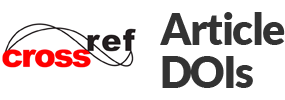
<style>
.page{position:relative;width:285px;height:100px;background:#ffffff}
.page>*{position:absolute;margin:0}
.t1{font:43.2px/43px "Lato-Black";letter-spacing:-0.04em;color:#333333}
</style>
<div class="page">
<p class="t1" style="left:160px;top:12px;width:125px;height:76px">Article<br>DOIs</p>
</div>
